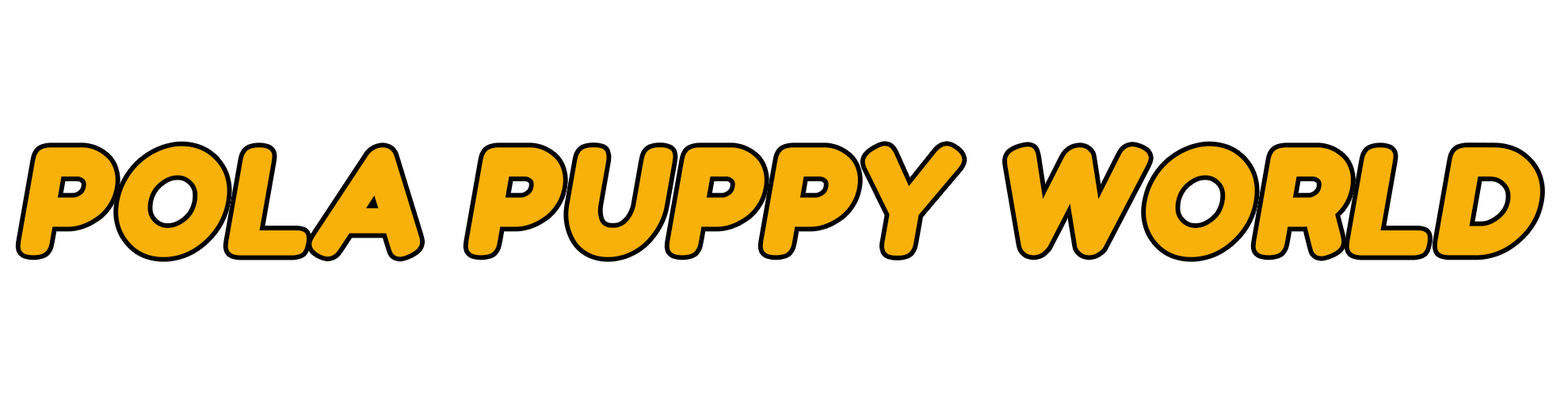
<style>
.page{position:relative;width:1568px;height:399px;background:#ffffff}
.page>*{position:absolute;margin:0}
.t1{font:142px "FredokaOne-Regular";color:#f8b108;font-weight:bold;font-style:italic}
</style>
<div class="page">
<p class="t1" style="left:20px;top:146px;width:1520px;height:112px">POLA PUPPY WORLD</p>
</div>
